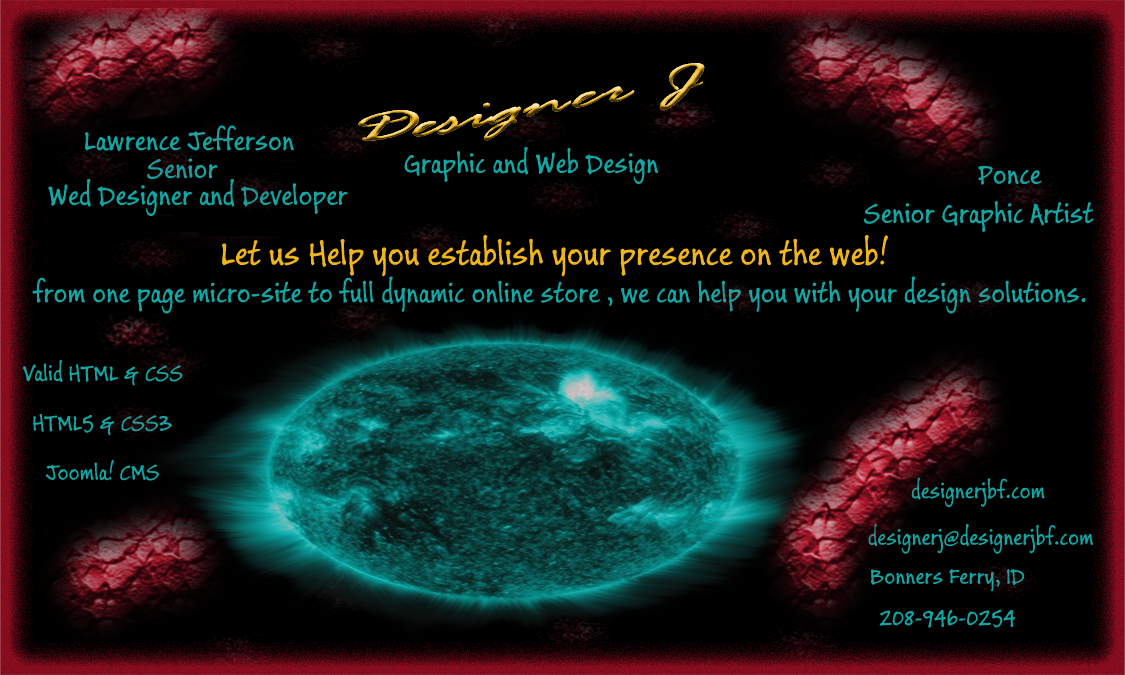
<style>
.page{position:relative;width:1125px;height:675px;background:#000000}
.page>*{position:absolute;margin:0}
.t1{font:48.6px "RageItalic";scale:1.85 1}
.t2{font:30px "BuxtonSketch";color:#10a7a4}
.t3{font:36px "BuxtonSketch";color:#f0b517}
.t4{font:24px "BuxtonSketch";color:#10a7a4}
</style>
<div class="page">
<p class="t1" style="left:358px;top:63px;width:347px;height:78px">Designer J</p>
<p class="t2" style="left:85px;top:125px;width:209px;height:27px">Lawrence Jefferson</p>
<p class="t2" style="left:404px;top:147px;width:255px;height:37px">Graphic and Web Design</p>
<p class="t2" style="left:147px;top:158px;width:71px;height:21px">Senior</p>
<p class="t2" style="left:978px;top:166px;width:64px;height:19px">Ponce</p>
<p class="t2" style="left:48px;top:179px;width:300px;height:37px">Wed Designer and Developer</p>
<p class="t2" style="left:864px;top:201px;width:230px;height:31px">Senior Graphic Artist</p>
<p class="t3" style="left:222px;top:235px;width:666px;height:42px">Let us Help you establish your presence on the web!</p>
<p class="t2" style="left:32px;top:276px;width:1054px;height:38px">from one page micro-site to full dynamic online store , we can help you with your design solutions.</p>
<p class="t4" style="left:22px;top:360px;width:161px;height:26px">Valid HTML &amp; CSS</p>
<p class="t4" style="left:33px;top:414px;width:139px;height:22px">HTML5 &amp; CSS3</p>
<p class="t4" style="left:46px;top:460px;width:113px;height:21px">Joomla! CMS</p>
<p class="t4" style="left:911px;top:477px;width:134px;height:31px">designerjbf.com</p>
<p class="t4" style="left:868px;top:524px;width:225px;height:30px">designerj@designerjbf.com</p>
<p class="t4" style="left:871px;top:569px;width:153px;height:23px">Bonners Ferry, ID</p>
<p class="t4" style="left:879px;top:609px;width:137px;height:19px">208-946-0254</p>
</div>
